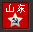
<style>
.page{position:relative;width:33px;height:32px;background:#c50000}
.page>*{position:absolute;margin:0}
.t1{font:10.4px "SimSun";color:#ffffff}
</style>
<div class="page">
<p class="t1" style="left:6px;top:4px;width:19px;height:9px">山东</p>
</div>
